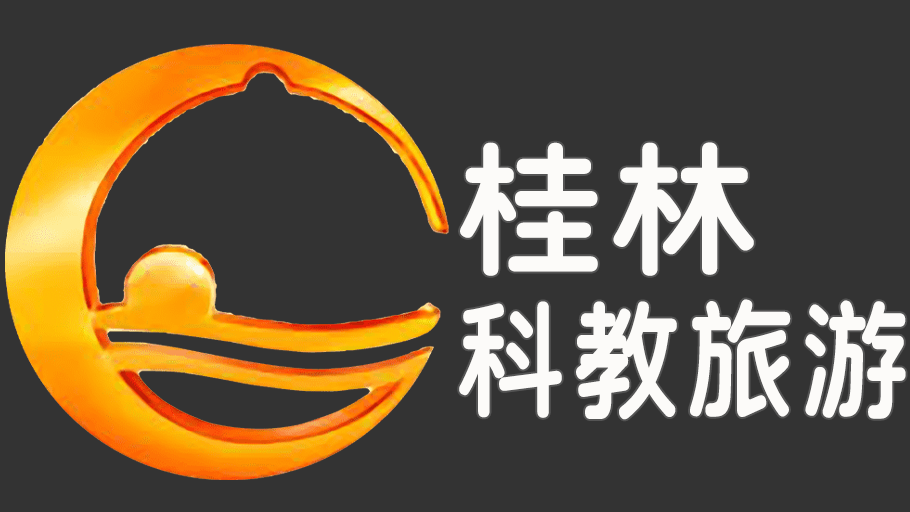
<style>
.page{position:relative;width:910px;height:512px;background:#333333}
.page>*{position:absolute;margin:0}
.t1{font:132px/160px "SJyuantijian-C-Regular";letter-spacing:0.02em;color:#fcfbf9;scale:0.85 1}
.t2{font:150px/160px "SJyuantijian-C-Regular";letter-spacing:0.02em;color:#fcfbf9}
</style>
<div class="page">
<p class="t1" style="left:459px;top:142px;width:447px;height:278px"><span class="t2">桂林<br></span>科教旅游</p>
</div>
